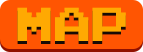
<style>
.page{position:relative;width:143px;height:52px;background:#ff5502}
.page>*{position:absolute;margin:0}
.t1{font:37.6px "PressStartK";color:#ffa902}
</style>
<div class="page">
<p class="t1" style="left:17px;top:10px;width:109px;height:34px">MAP</p>
<p class="t1" style="left:17px;top:7px;width:109px;height:34px">MAP</p>
</div>
